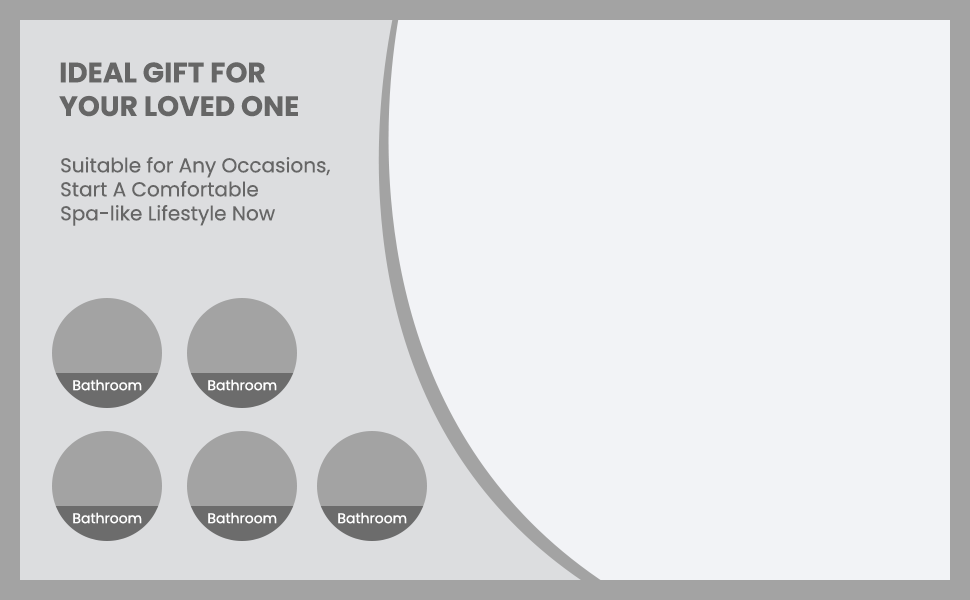
<style>
.page{position:relative;width:970px;height:600px;background:#f2f3f6}
.page>*{position:absolute;margin:0}
.t1{font:28px "Poppins-Bold";color:#666666}
.t2{font:20px "Poppins-Regular";color:#666666}
.t3{font:14px "Poppins-Regular";color:#ffffff}
</style>
<div class="page">
<p class="t1" style="left:59px;top:62px;width:239px;height:55px">IDEAL GIFT FOR<br>YOUR LOVED ONE</p>
<p class="t2" style="left:61px;top:157px;width:269px;height:69px">Suitable for Any Occasions,<br>Start A Comfortable<br>Spa-like Lifestyle Now</p>
<p class="t3" style="left:73px;top:379px;width:69px;height:12px">Bathroom</p>
<p class="t3" style="left:208px;top:379px;width:69px;height:12px">Bathroom</p>
<p class="t3" style="left:73px;top:512px;width:69px;height:12px">Bathroom</p>
<p class="t3" style="left:208px;top:512px;width:69px;height:12px">Bathroom</p>
<p class="t3" style="left:338px;top:512px;width:69px;height:12px">Bathroom</p>
</div>
